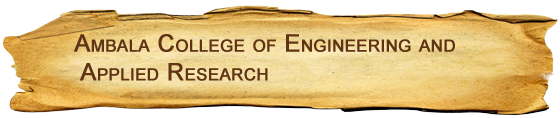
<style>
.page{position:relative;width:560px;height:118px;background:#ffffff}
.page>*{position:absolute;margin:0}
.t1{font:24px "ArialMT";color:#603314;font-variant:small-caps;font-weight:bold}
</style>
<div class="page">
<p class="t1" style="left:74px;top:34px;width:381px;height:47px">Ambala College of Engineering and<br> Applied Research</p>
</div>
